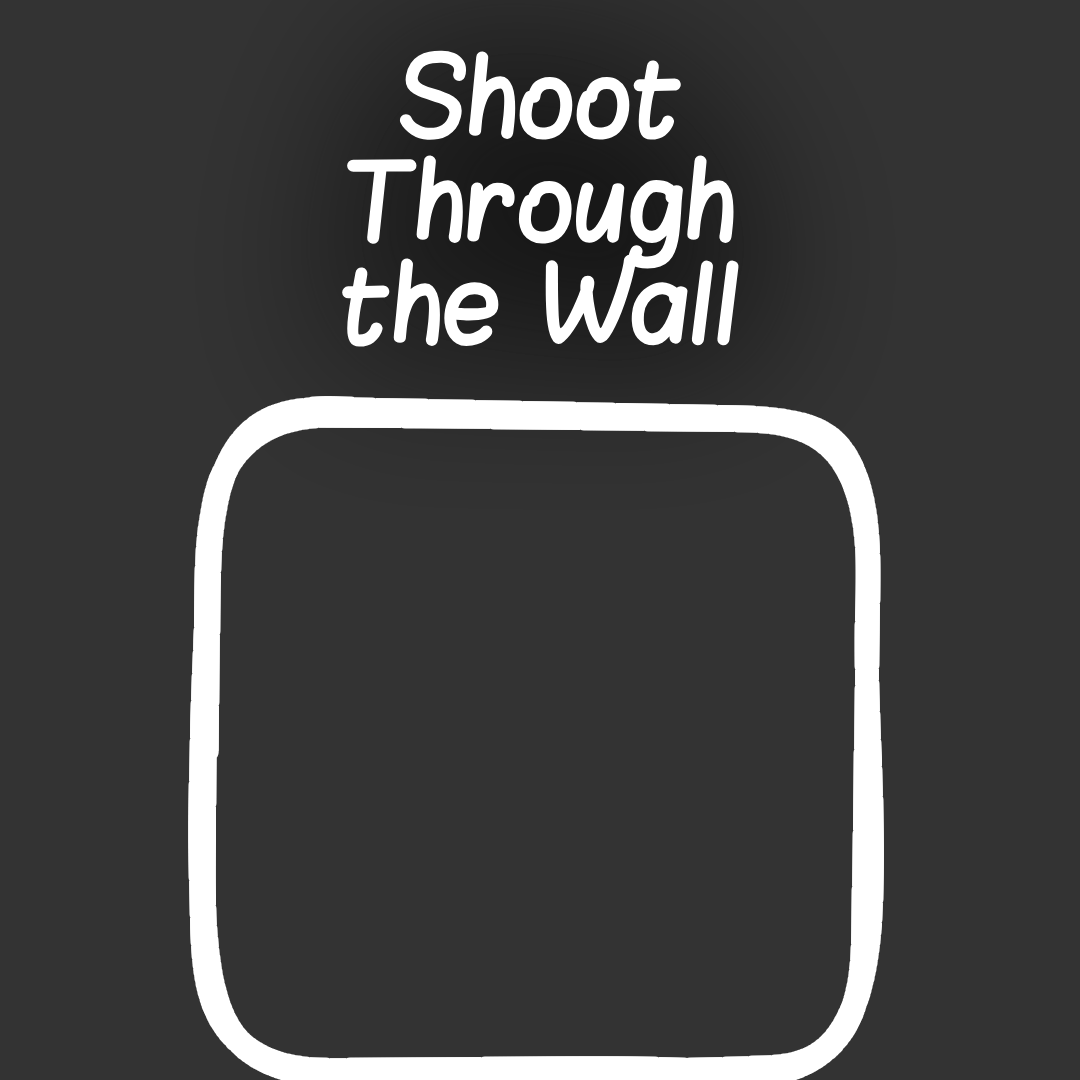
<style>
.page{position:relative;width:1080px;height:1080px;background:#333333}
.page>*{position:absolute;margin:0}
.t1{font:86.1px "Blokletters-Viltstift";color:#ffffff}
</style>
<div class="page">
<p class="t1" style="left:342px;top:50px;width:397px;height:297px;text-align:center">Shoot<br>Through<br>the Wall</p>
</div>
